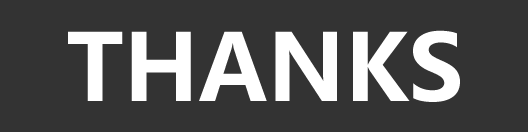
<style>
.page{position:relative;width:528px;height:132px;background:#333333}
.page>*{position:absolute;margin:0}
.t1{font:91.4px "MicrosoftYaHei-Bold";color:#ffffff}
</style>
<div class="page">
<p class="t1" style="left:68px;top:30px;width:392px;height:72px">THANKS</p>
</div>
